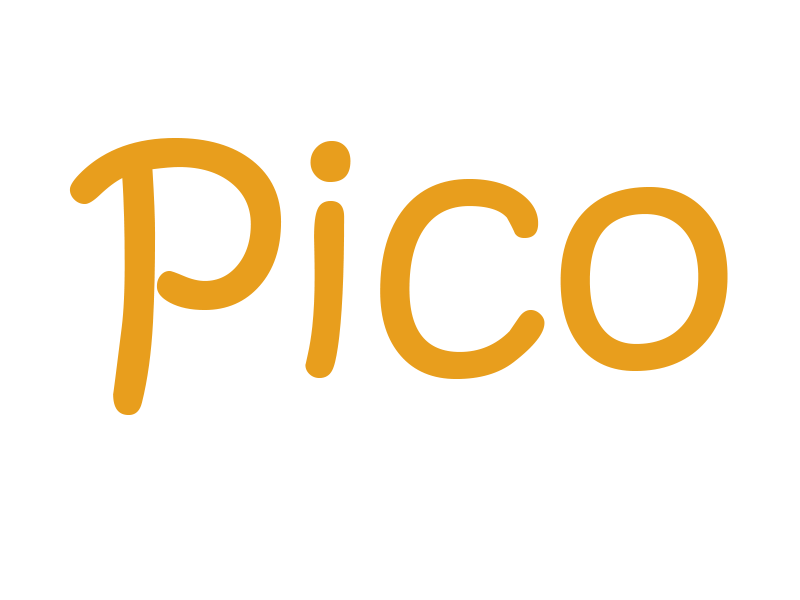
<style>
.page{position:relative;width:800px;height:600px;background:#ffffff}
.page>*{position:absolute;margin:0}
.t1{font:300px "KristenITC-Regular";color:#e89e1d}
</style>
<div class="page">
<p class="t1" style="left:69px;top:138px;width:659px;height:277px">Pico</p>
</div>
